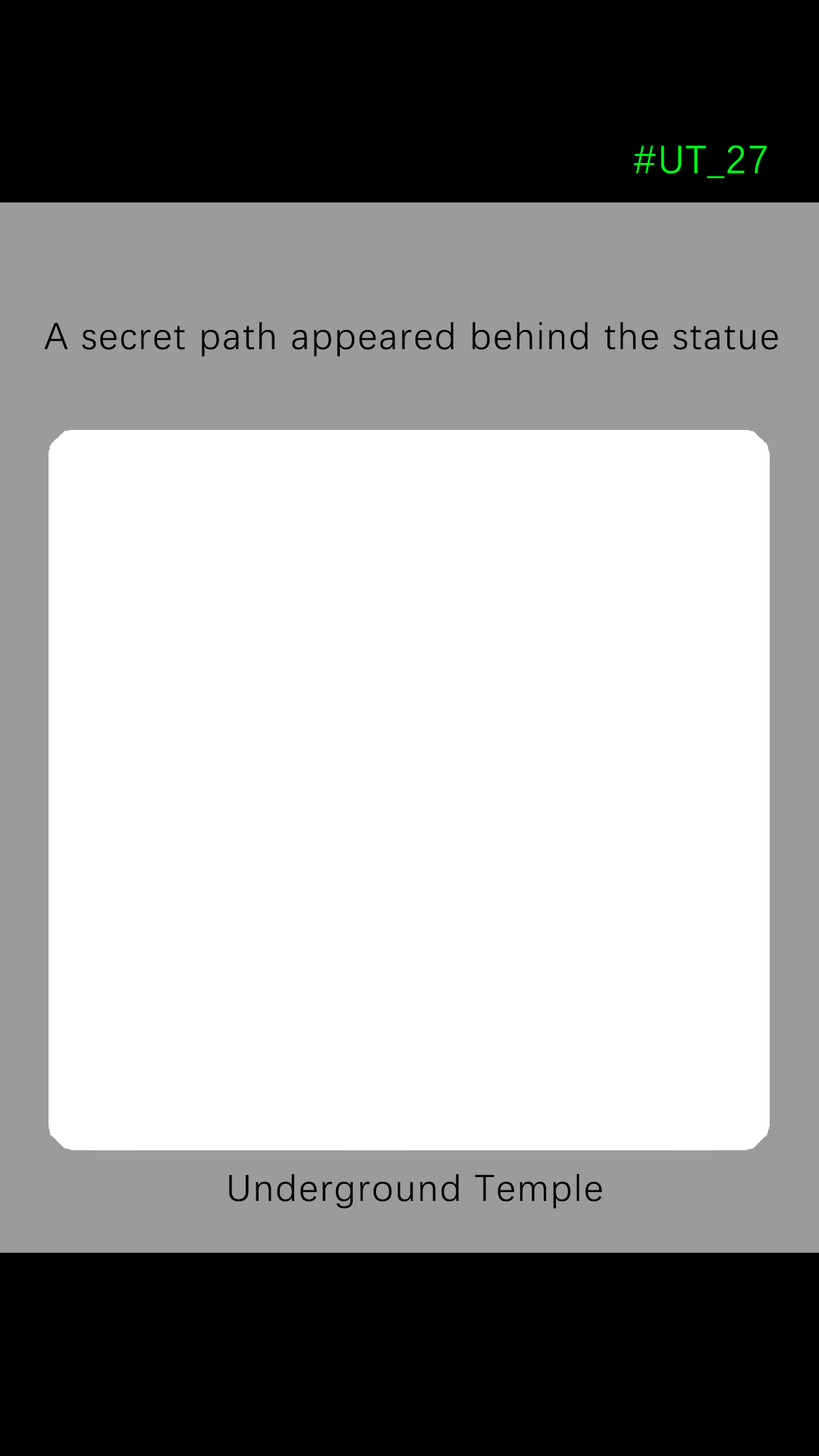
<style>
.page{position:relative;width:819px;height:1456px;background:#ffffff}
.page>*{position:absolute;margin:0}
.t1{font:39.2px "DengXian-Regular";letter-spacing:0.04em;color:#00ff1e}
.t2{font:37.9px "DengXian-Regular";letter-spacing:0.04em;color:#000000}
</style>
<div class="page">
<p class="t1" style="left:634px;top:145px;width:133px;height:33px">#UT_27</p>
<p class="t2" style="left:44px;top:322px;width:734px;height:34px">A secret path appeared behind the statue</p>
<p class="t2" style="left:229px;top:1174px;width:373px;height:35px">Underground Temple</p>
</div>
